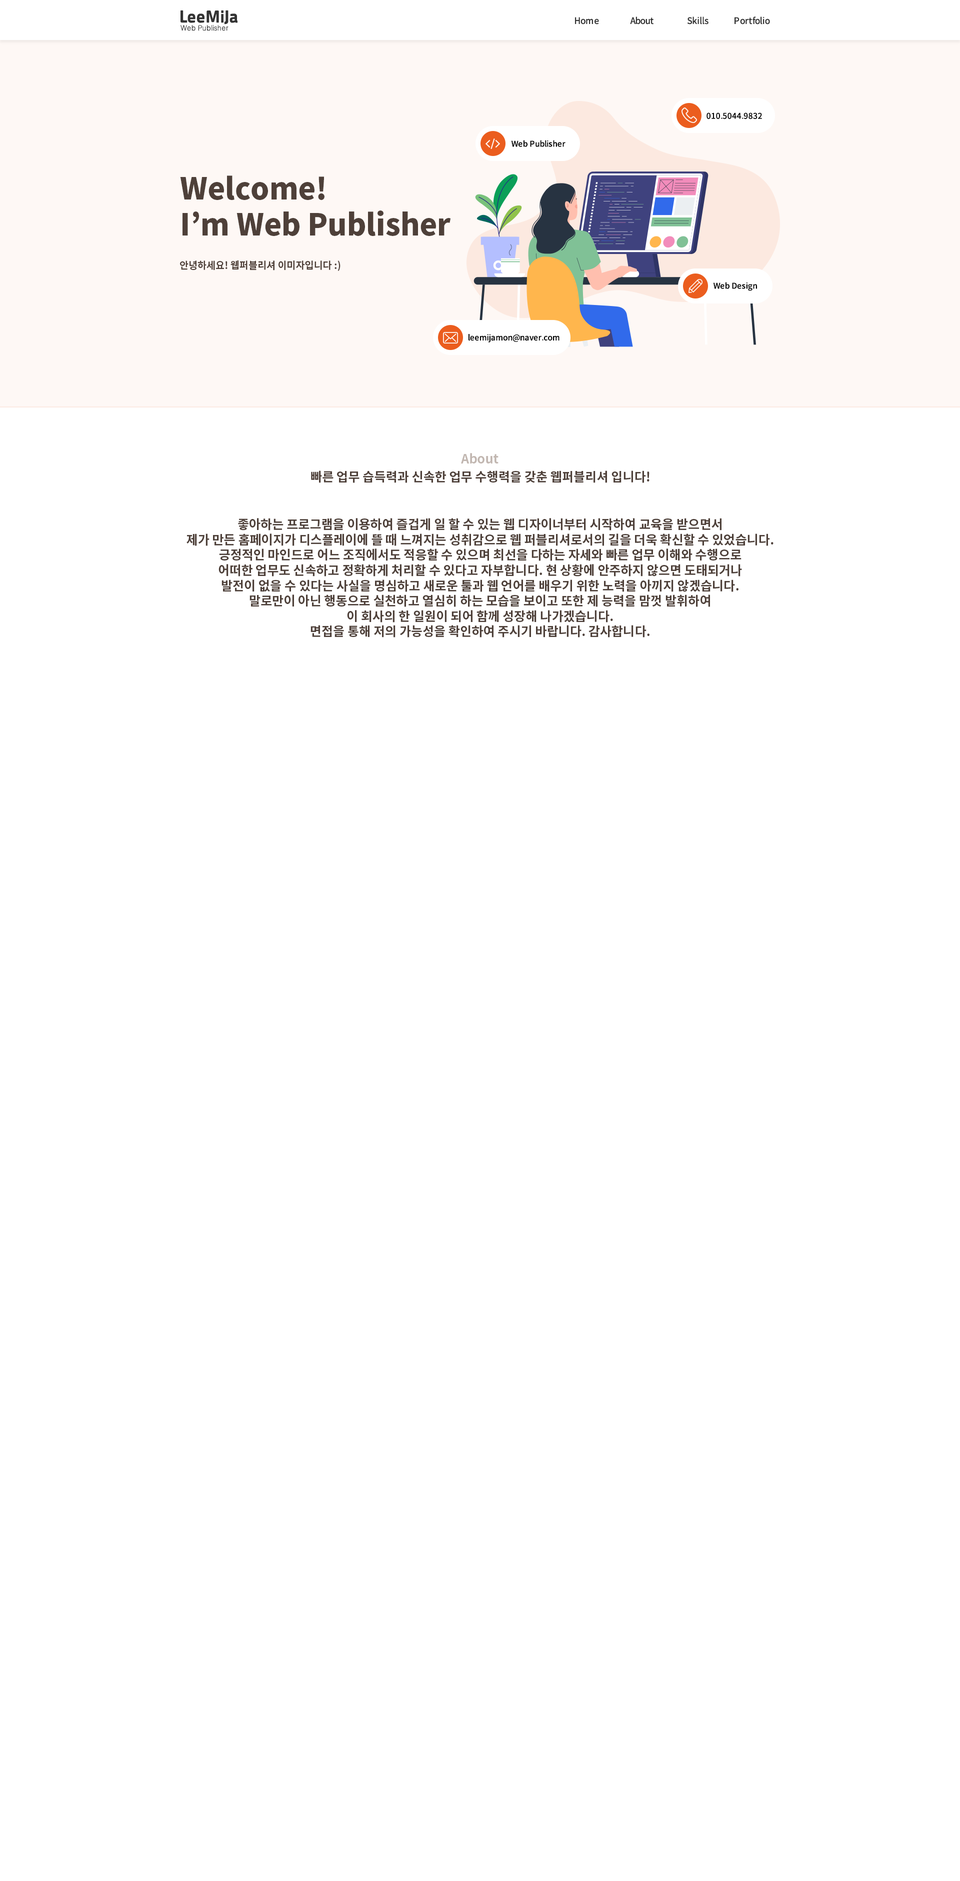
<style>
.page{position:relative;width:960px;height:1881px;background:#ffffff}
.page>*{position:absolute;margin:0}
.t1{font:13.4px "RecipekoreaM";color:#333333}
.t2{font:9px "NotoSansCJKkr-Medium";color:#333333;scale:0.97 1}
.t3{font:7.4px "Gulim";color:#333333}
.t4{font:8px "NotoSansCJKkr-Medium";color:#000000}
.t5{font:30px "NotoSansCJKkr-Black";color:#4e4039}
.t6{font:10px "NotoSansCJKkr-Bold";color:#4e4039}
.t7{font:12.7px "NotoSansCJKkr-Bold";color:#c2b7b1}
.t8{font:12.7px "NotoSansCJKkr-Bold";color:#4e4039}
</style>
<div class="page">
<p class="t1" style="left:180px;top:10px;width:58px;height:14px">LeeMiJa</p>
<p class="t2" style="left:575px;top:17px;width:24px;height:7px">Home</p>
<p class="t2" style="left:630px;top:16px;width:24px;height:8px">About</p>
<p class="t2" style="left:687px;top:16px;width:21px;height:8px">Skills</p>
<p class="t2" style="left:734px;top:16px;width:36px;height:8px">Portfolio</p>
<p class="t3" style="left:180px;top:25px;width:48px;height:6px">Web Publisher</p>
<p class="t4" style="left:706px;top:112px;width:56px;height:7px">010.5044.9832</p>
<p class="t4" style="left:511px;top:140px;width:55px;height:7px">Web Publisher</p>
<p class="t5" style="left:180px;top:176px;width:270px;height:60px">Welcome!<br>I’m Web Publisher</p>
<p class="t6" style="left:180px;top:260px;width:160px;height:11px">안녕하세요! 웹퍼블리셔 이미자입니다 :)</p>
<p class="t4" style="left:713px;top:282px;width:44px;height:9px">Web Design</p>
<p class="t4" style="left:468px;top:334px;width:92px;height:8px">leemijamon@naver.com</p>
<p class="t7" style="left:461px;top:453px;width:37px;height:11px">About</p>
<p class="t8" style="left:311px;top:470px;width:339px;height:13px">빠른 업무 습득력과 신속한 업무 수행력을 갖춘 웹퍼블리셔 입니다!</p>
<p class="t8" style="left:186px;top:518px;width:588px;height:120px;text-align:center">좋아하는 프로그램을 이용하여 즐겁게 일 할 수 있는 웹 디자이너부터 시작하여 교육을 받으면서<br>제가 만든 홈페이지가 디스플레이에 뜰 때 느껴지는 성취감으로 웹 퍼블리셔로서의 길을 더욱 확신할 수 있었습니다.<br>긍정적인 마인드로 어느 조직에서도 적응할 수 있으며 최선을 다하는 자세와 빠른 업무 이해와 수행으로<br>어떠한 업무도 신속하고 정확하게 처리할 수 있다고 자부합니다. 현 상황에 안주하지 않으면 도태되거나<br>발전이 없을 수 있다는 사실을 명심하고 새로운 툴과 웹 언어를 배우기 위한 노력을 아끼지 않겠습니다.<br>말로만이 아닌 행동으로 실천하고 열심히 하는 모습을 보이고 또한 제 능력을 맘껏 발휘하여<br>이 회사의 한 일원이 되어 함께 성장해 나가겠습니다.<br>면접을 통해 저의 가능성을 확인하여 주시기 바랍니다. 감사합니다.</p>
</div>
